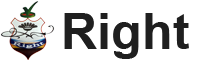
<style>
.page{position:relative;width:200px;height:60px;background:#ffffff}
.page>*{position:absolute;margin:0}
.t1{font:50.1px "Arial-BoldMT";color:#1f1f1f}
</style>
<div class="page">
<p class="t1" style="left:64px;top:13px;width:125px;height:46px">Right</p>
</div>
